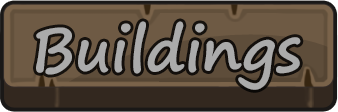
<style>
.page{position:relative;width:338px;height:112px}
.page>*{position:absolute;margin:0}
.t1{font:60px "SegoePrint-Bold";color:#ababab}
</style>
<div class="page">
<p class="t1" style="left:36px;top:21px;width:265px;height:69px">Buildings</p>
</div>
